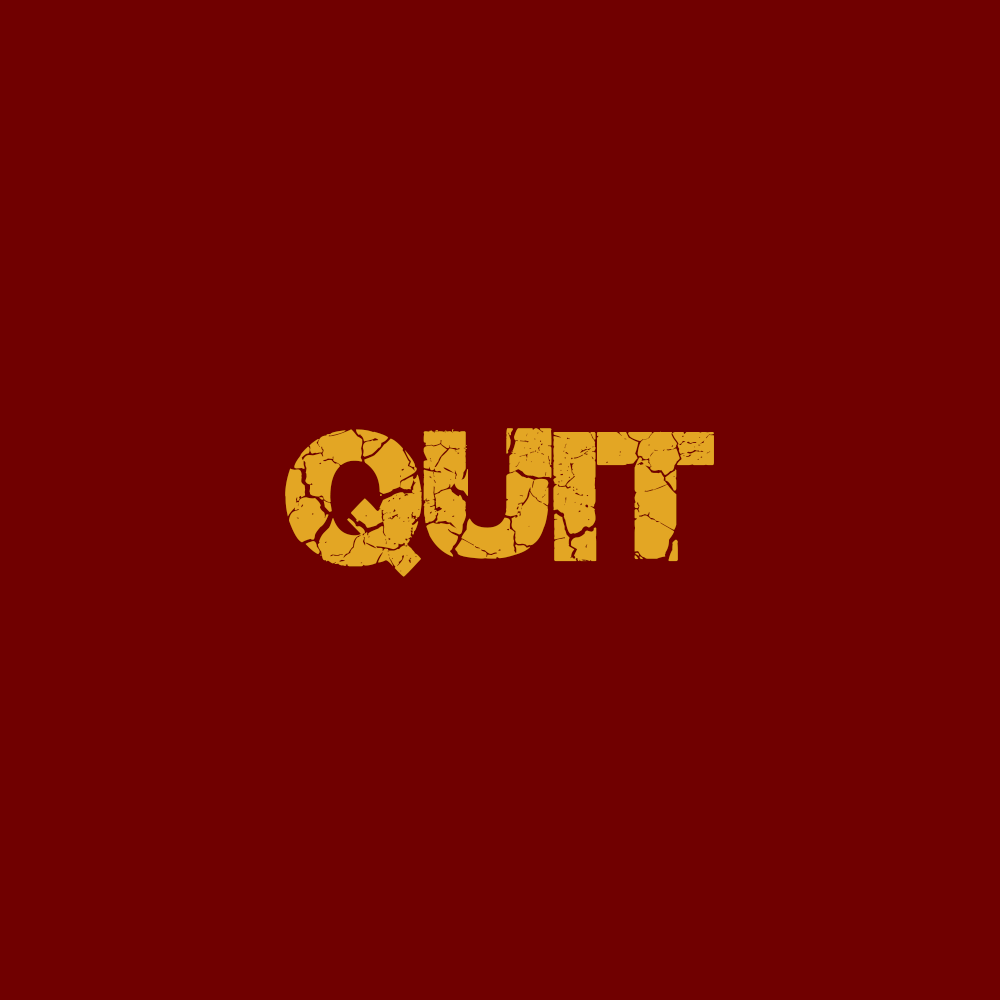
<style>
.page{position:relative;width:1000px;height:1000px;background:#700000}
.page>*{position:absolute;margin:0}
.t1{font:155.6px "Crackvetica";color:#e3a624}
</style>
<div class="page">
<p class="t1" style="left:285px;top:428px;width:429px;height:149px">Quit</p>
</div>
